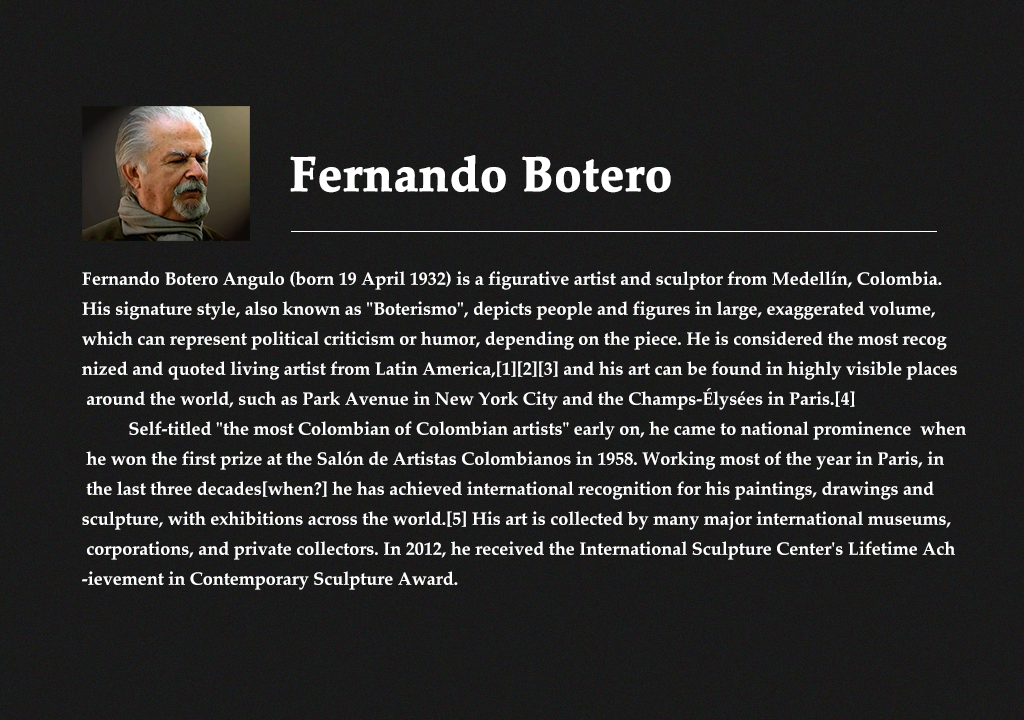
<style>
.page{position:relative;width:1024px;height:720px}
.page>*{position:absolute;margin:0}
.t1{font:48px "PalatinoLinotype-Bold";color:#ffffff;font-weight:bold}
.t2{font:18px/30px "PalatinoLinotype-Bold";color:#ffffff}
</style>
<div class="page">
<p class="t1" style="left:290px;top:155px;width:381px;height:38px">Fernando Botero</p>
<p class="t2" style="left:82px;top:271px;width:884px;height:319px">Fernando Botero Angulo (born 19 April 1932) is a figurative artist and sculptor from Medellín, Colombia. <br>His signature style, also known as "Boterismo", depicts people and figures in large, exaggerated volume, <br>which can represent political criticism or humor, depending on the piece. He is considered the most recog<br>nized and quoted living artist from Latin America,[1][2][3] and his art can be found in highly visible places<br> around the world, such as Park Avenue in New York City and the Champs-Élysées in Paris.[4]<br>    Self-titled "the most Colombian of Colombian artists" early on, he came to national prominence  when<br> he won the first prize at the Salón de Artistas Colombianos in 1958. Working most of the year in Paris, in<br> the last three decades[when?] he has achieved international recognition for his paintings, drawings and <br>sculpture, with exhibitions across the world.[5] His art is collected by many major international museums,<br> corporations, and private collectors. In 2012, he received the International Sculpture Center's Lifetime Ach<br>-ievement in Contemporary Sculpture Award.</p>
</div>
